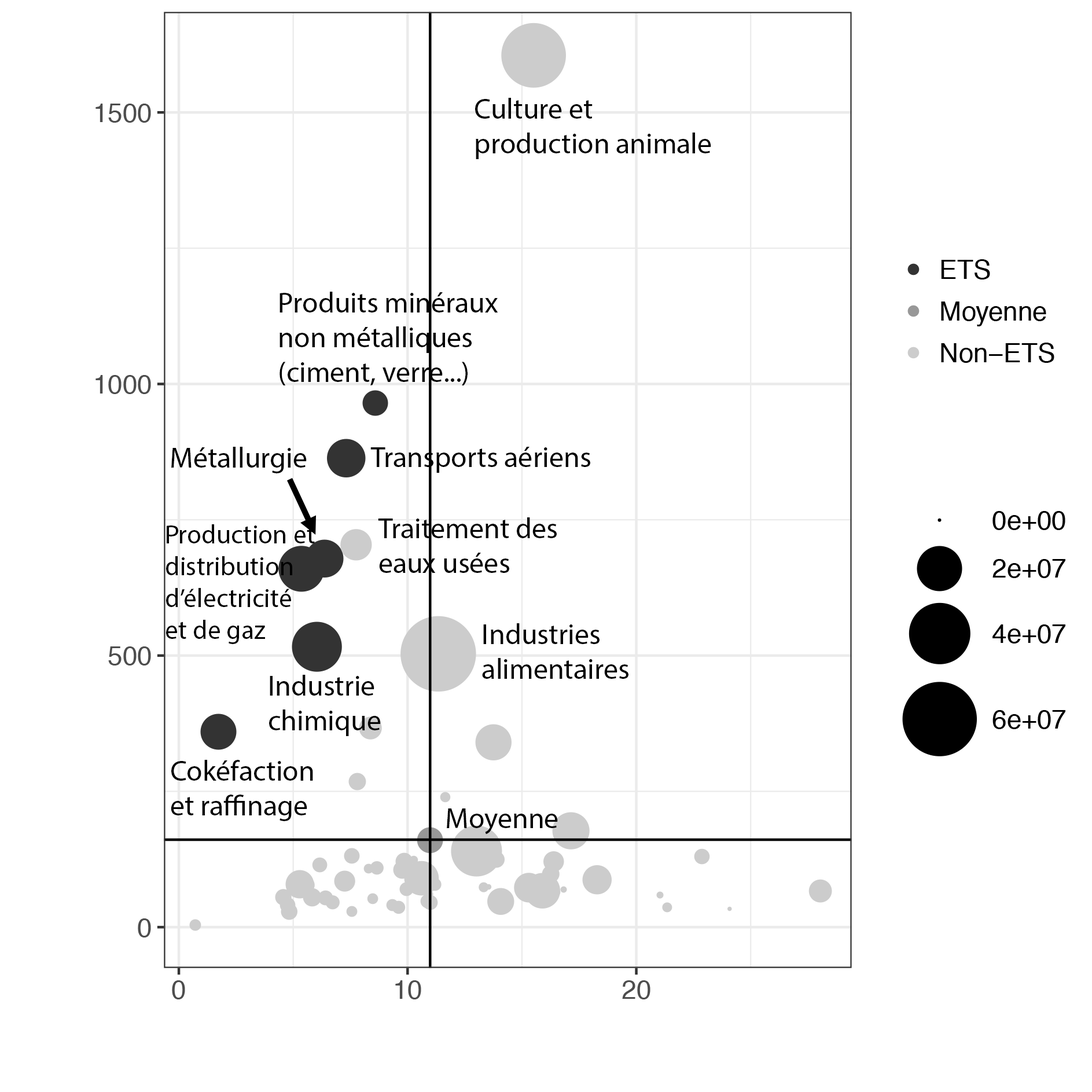
<style>
.page{position:relative;width:1092px;height:1092px;background:#ffffff}
.page>*{position:absolute;margin:0}
.t1{font:28.9px "MyriadPro-Regular";color:#000000}
.t2{font:26.5px "MyriadPro-Regular";color:#000000}
</style>
<div class="page">
<p class="t1" style="left:475px;top:98px;width:236px;height:61px">Culture et <br>production animale</p>
<p class="t1" style="left:280px;top:292px;width:218px;height:93px">Produits minéraux<br>non métalliques<br>(ciment, verre...)</p>
<p class="t1" style="left:171px;top:447px;width:136px;height:26px">Métallurgie</p>
<p class="t1" style="left:370px;top:447px;width:220px;height:26px">Transports aériens</p>
<p class="t1" style="left:378px;top:517px;width:179px;height:56px">Traitement des<br>eaux usées</p>
<p class="t2" style="left:166px;top:524px;width:149px;height:120px">Production et<br>distribution<br>d’électricité<br>et de gaz</p>
<p class="t1" style="left:482px;top:623px;width:146px;height:56px">Industries<br>alimentaires</p>
<p class="t1" style="left:269px;top:675px;width:112px;height:61px">Industrie<br>chimique</p>
<p class="t1" style="left:171px;top:760px;width:142px;height:61px">Cokéfaction<br>et raffinage</p>
<p class="t1" style="left:447px;top:808px;width:111px;height:26px">Moyenne</p>
</div>
